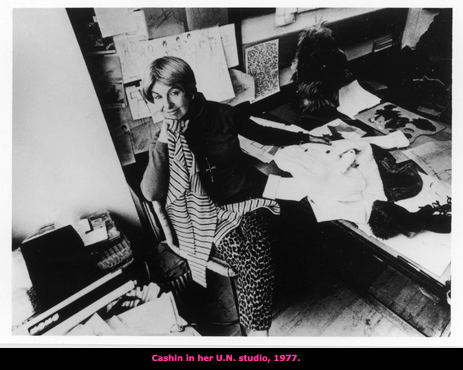
<style>
.page{position:relative;width:463px;height:370px}
.page>*{position:absolute;margin:0}
.t1{font:8.3px "Verdana-Bold";color:#ff3399}
</style>
<div class="page">
<p class="t1" style="left:152px;top:354px;width:148px;height:9px">Cashin in her U.N. studio, 1977.</p>
</div>
